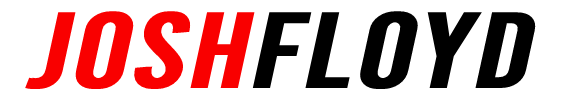
<style>
.page{position:relative;width:562px;height:100px;background:#ffffff}
.page>*{position:absolute;margin:0}
.t1{font:108.1px "Bebas-Regular";color:#f90000;font-weight:bold;font-style:italic;scale:1.2 1}
.t2{font:108.1px "Bebas-Regular";color:#000000;font-weight:bold;font-style:italic;scale:1.2 1}
</style>
<div class="page">
<p class="t1" style="left:25px;top:11px;width:230px;height:78px">JOSH</p>
<p class="t2" style="left:252px;top:11px;width:284px;height:78px">FLOYD</p>
</div>
